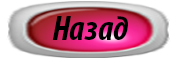
<style>
.page{position:relative;width:180px;height:60px;background:#ffffff}
.page>*{position:absolute;margin:0}
.t1{font:35.5px "MyriadPro-BoldCondIt";color:#000000}
</style>
<div class="page">
<p class="t1" style="left:52px;top:16px;width:76px;height:24px">Назад</p>
</div>
